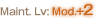
<style>
.page{position:relative;width:100px;height:20px;background:#ffffff}
.page>*{position:absolute;margin:0}
.t1{font:10px "GothicMB101Pro-DeBold";letter-spacing:-0.04em;color:#cc6719}
.t2{font:14px "GothicMB101Pro-DeBold";letter-spacing:-0.04em;color:#cc6719}
.t3{font:10px "GothicMB101Pro-DeBold";letter-spacing:-0.04em;color:#8b6e51}
</style>
<div class="page">
<p class="t1" style="left:52px;top:4px;width:41px;height:12px">Mod.+<span class="t2">2</span></p>
<p class="t3" style="left:0px;top:7px;width:49px;height:9px;opacity:0.9">Maint. Lv:</p>
</div>
